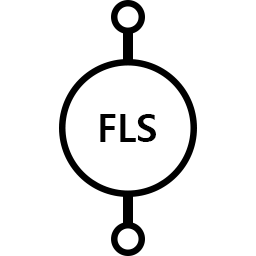
<style>
.page{position:relative;width:256px;height:256px;background:#ffffff}
.page>*{position:absolute;margin:0}
.t1{font:37.5px "MalgunGothicBold";color:#000000}
</style>
<div class="page">
<p class="t1" style="left:100px;top:114px;width:56px;height:28px">FLS</p>
</div>
